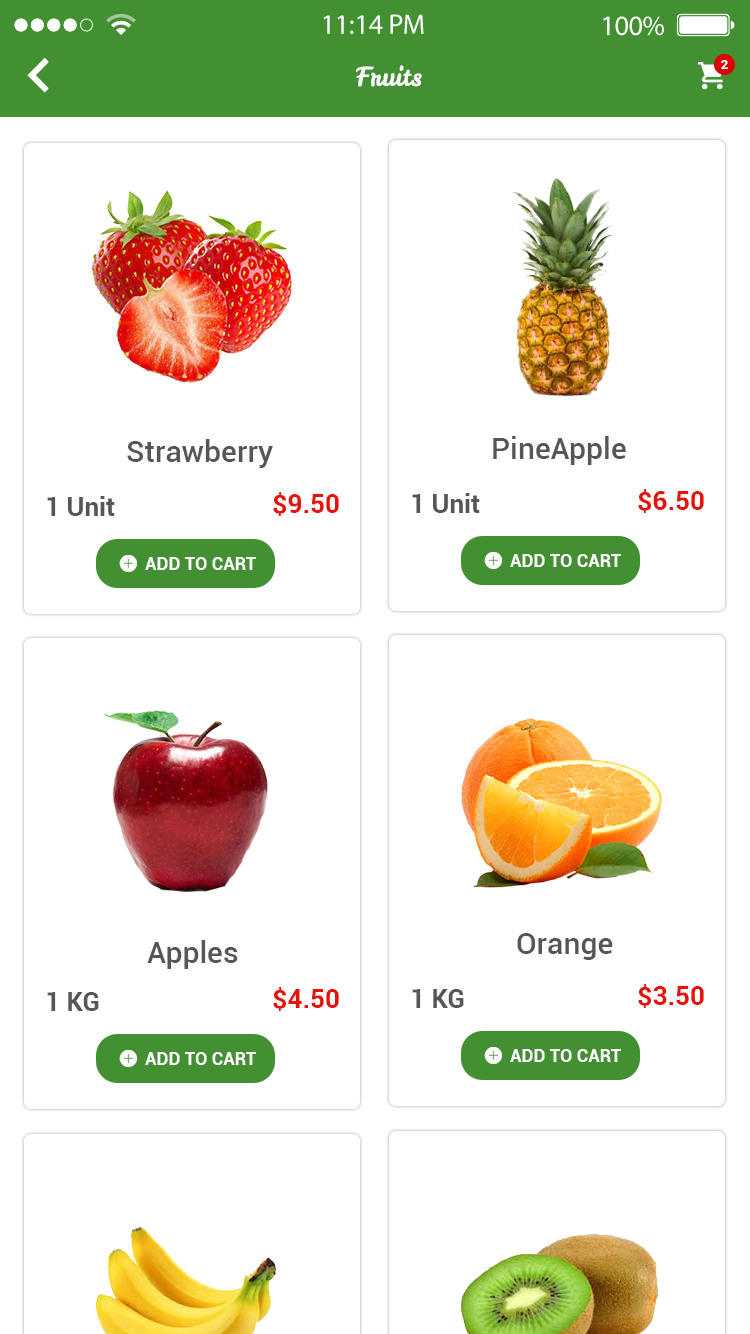
<style>
.page{position:relative;width:750px;height:1334px;background:#ffffff}
.page>*{position:absolute;margin:0}
.t1{font:26px "LeckerliOne-Regular";color:#ffffff}
.t2{font:13.1px "Roboto-Bold";color:#ffffff}
.t3{font:30px "Roboto-Medium";color:#575656}
.t4{font:26px "Roboto-Bold";color:#575656}
.t5{font:26px "Roboto-Bold";color:#e7130a}
.t6{font:18px "Roboto-Bold";color:#ffffff}
</style>
<div class="page">
<p class="t1" style="left:356px;top:65px;width:66px;height:22px">Fruits</p>
<p class="t2" style="left:721px;top:60px;width:7px;height:9px">2</p>
<p class="t3" style="left:493px;top:436px;width:133px;height:29px">PineApple</p>
<p class="t3" style="left:127px;top:439px;width:146px;height:29px">Strawberry</p>
<p class="t4" style="left:47px;top:496px;width:68px;height:20px">1 Unit</p>
<p class="t5" style="left:273px;top:492px;width:66px;height:24px">$9.50</p>
<p class="t4" style="left:412px;top:493px;width:68px;height:20px">1 Unit</p>
<p class="t5" style="left:638px;top:489px;width:66px;height:24px">$6.50</p>
<p class="t6" style="left:145px;top:557px;width:111px;height:13px">ADD TO CART</p>
<p class="t6" style="left:510px;top:554px;width:111px;height:13px">ADD TO CART</p>
<p class="t3" style="left:147px;top:940px;width:91px;height:29px">Apples</p>
<p class="t3" style="left:517px;top:933px;width:96px;height:27px">Orange</p>
<p class="t5" style="left:273px;top:987px;width:66px;height:24px">$4.50</p>
<p class="t4" style="left:412px;top:989px;width:52px;height:19px">1 KG</p>
<p class="t5" style="left:638px;top:984px;width:66px;height:24px">$3.50</p>
<p class="t4" style="left:47px;top:992px;width:52px;height:19px">1 KG</p>
<p class="t6" style="left:510px;top:1049px;width:111px;height:13px">ADD TO CART</p>
<p class="t6" style="left:145px;top:1052px;width:111px;height:13px">ADD TO CART</p>
</div>
